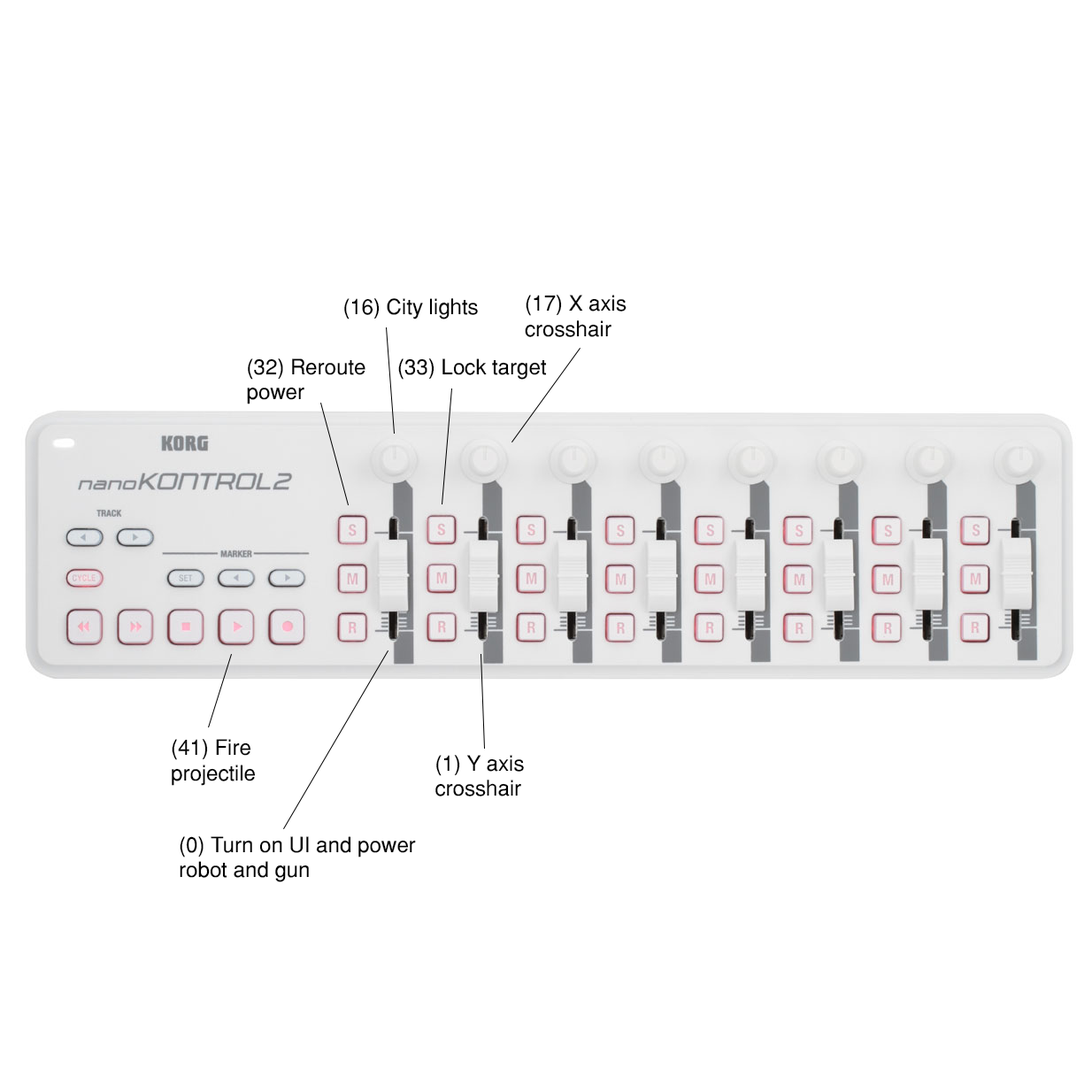
<style>
.page{position:relative;width:1092px;height:1092px;background:#ffffff}
.page>*{position:absolute;margin:0}
.t1{font:21.2px "Helvetica-Normal";color:#000000}
</style>
<div class="page">
<p class="t1" style="left:344px;top:298px;width:134px;height:21px">(16) City lights</p>
<p class="t1" style="left:525px;top:295px;width:102px;height:42px">(17) X axis<br>crosshair</p>
<p class="t1" style="left:247px;top:358px;width:118px;height:46px">(32) Reroute<br>power</p>
<p class="t1" style="left:398px;top:358px;width:149px;height:22px">(33) Lock target</p>
<p class="t1" style="left:172px;top:739px;width:84px;height:47px">(41) Fire<br>projectile</p>
<p class="t1" style="left:435px;top:755px;width:89px;height:41px">(1) Y axis<br>crosshair</p>
<p class="t1" style="left:180px;top:836px;width:236px;height:46px">(0) Turn on UI and power robot and gun</p>
</div>
